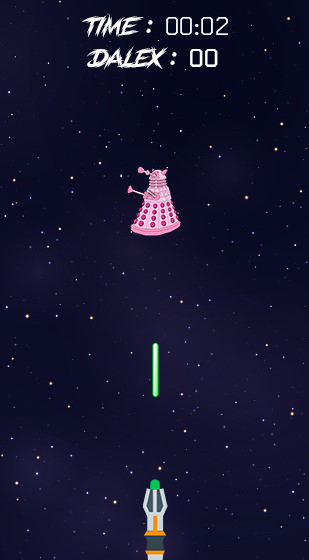
<style>
.page{position:relative;width:309px;height:560px}
.page>*{position:absolute;margin:0}
.t1{font:25px "LetricPERSONALUSEONLY-Regular";color:#fefefe}
.t2{font:41.7px "THChakraPetch";color:#fefefe}
.t3{font:41.7px "THChakraPetch-Bold";color:#fefefe}
</style>
<div class="page">
<p class="t1" style="left:82px;top:14px;width:146px;height:24px">time : <span class="t2">00:02</span></p>
<p class="t1" style="left:86px;top:46px;width:132px;height:24px">Dalex : <span class="t3">00</span></p>
</div>
